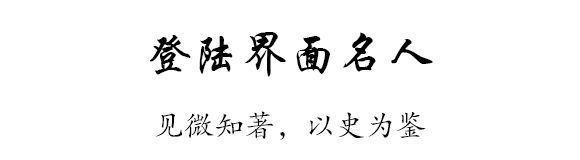
<style>
.page{position:relative;width:580px;height:160px;background:#ffffff}
.page>*{position:absolute;margin:0}
.t1{font:48px "STXingkai";letter-spacing:0.01em;color:#000000}
.t2{font:30px "FZKTJW--GB1-0";letter-spacing:0.01em;color:#000000}
</style>
<div class="page">
<p class="t1" style="left:150px;top:32px;width:283px;height:45px">登陆界面名人名言</p>
<p class="t2" style="left:155px;top:111px;width:271px;height:29px">见微知著，以史为鉴</p>
</div>
